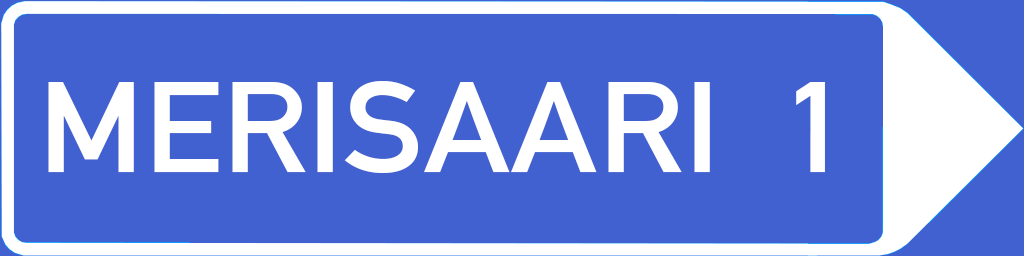
<style>
.page{position:relative;width:1024px;height:256px;background:#4261d1}
.page>*{position:absolute;margin:0}
.t1{font:127.4px "AlteDIN1451Mittelschrift";color:#ffffff;scale:1.1 1}
</style>
<div class="page">
<p class="t1" style="left:48px;top:81px;width:777px;height:92px">MERISAARI  1</p>
</div>
